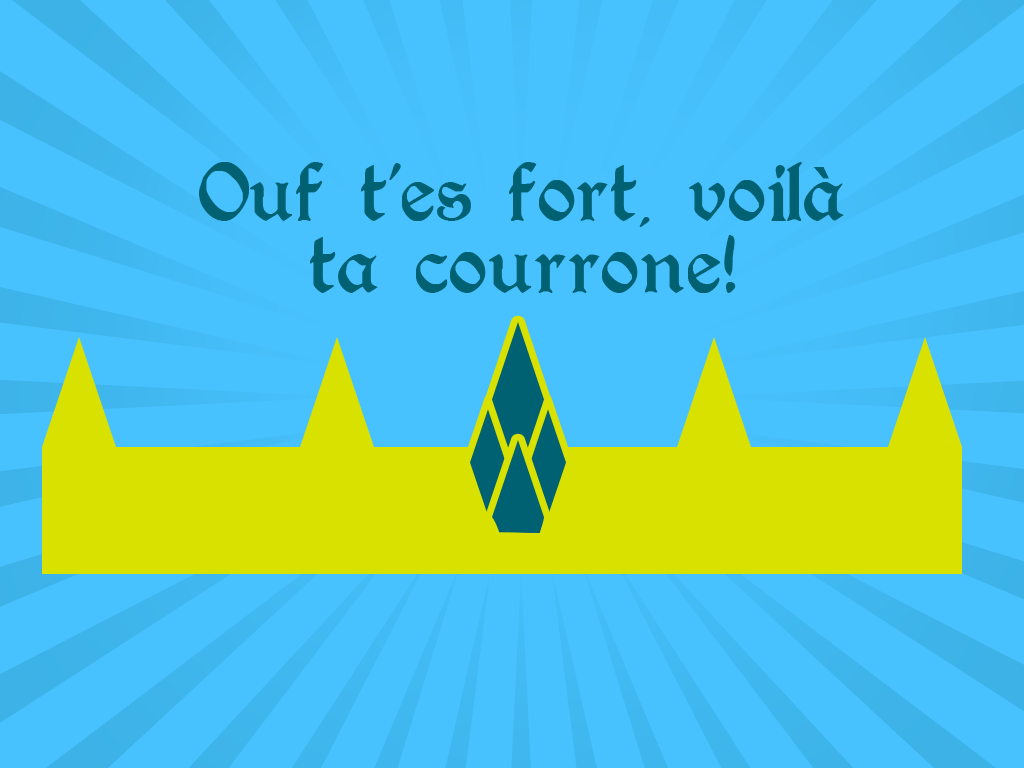
<style>
.page{position:relative;width:1024px;height:768px;background:#48c2ff}
.page>*{position:absolute;margin:0}
.t1{font:92px "Augusta-Regular";color:#006172}
</style>
<div class="page">
<p class="t1" style="left:199px;top:162px;width:645px;height:131px">Ouf t’es fort, voilà ta courrone!</p>
</div>
